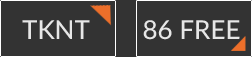
<style>
.page{position:relative;width:252px;height:57px;background:#333333}
.page>*{position:absolute;margin:0}
.t1{font:26px "Lato-Medium";color:#e7e7e7;text-transform:uppercase}
</style>
<div class="page">
<p class="t1" style="left:22px;top:20px;width:68px;height:19px">TKNT</p>
<p class="t1" style="left:143px;top:20px;width:97px;height:20px">86 FREE</p>
</div>
